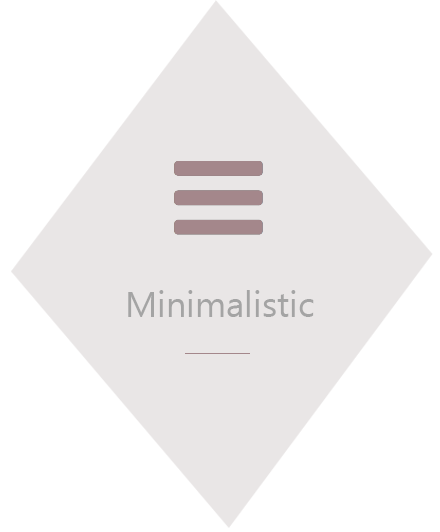
<style>
.page{position:relative;width:440px;height:532px;background:#ffffff}
.page>*{position:absolute;margin:0}
.t1{font:36px "Ebrima";color:#a4a4a4}
</style>
<div class="page">
<p class="t1" style="left:128px;top:290px;width:186px;height:27px">Minimalistic</p>
</div>
